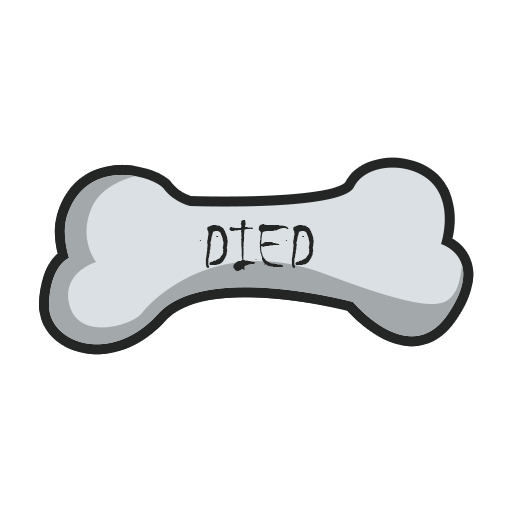
<style>
.page{position:relative;width:512px;height:512px;background:#ffffff}
.page>*{position:absolute;margin:0}
.t1{font:72px "Chiller-Regular";color:#242626}
</style>
<div class="page">
<p class="t1" style="left:199px;top:220px;width:115px;height:51px">DIED</p>
</div>
